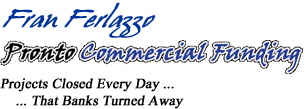
<style>
.page{position:relative;width:305px;height:109px;background:#ffffff}
.page>*{position:absolute;margin:0}
.t1{font:24px "HansHand";color:#003399;font-weight:bold;font-style:italic}
.t2{font:14px "TimesNewRomanPSMT";color:#000000;font-weight:bold;font-style:italic}
</style>
<div class="page">
<p class="t1" style="left:2px;top:2px;width:154px;height:36px">Fran Ferlazzo</p>
<p class="t2" style="left:0px;top:78px;width:184px;height:31px">Projects Closed Every Day ...<br>    ... That Banks Turned Away</p>
</div>
